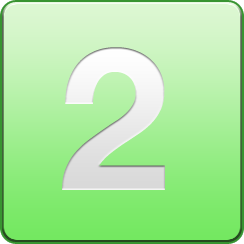
<style>
.page{position:relative;width:244px;height:244px}
.page>*{position:absolute;margin:0}
.t1{font:200px "HelveticaNeue-Bold";color:#e9e9e9}
</style>
<div class="page">
<p class="t1" style="left:62px;top:47px;width:103px;height:143px">2</p>
</div>
